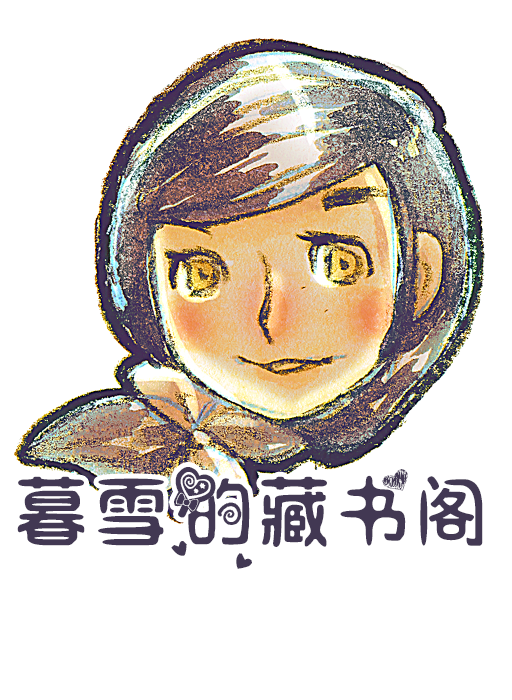
<style>
.page{position:relative;width:512px;height:700px;background:#ffffff}
.page>*{position:absolute;margin:0}
.t1{font:80px "-";color:#423853}
</style>
<div class="page">
<p class="t1" style="left:17px;top:467px;width:466px;height:102px">暮雪的藏书阁</p>
</div>
